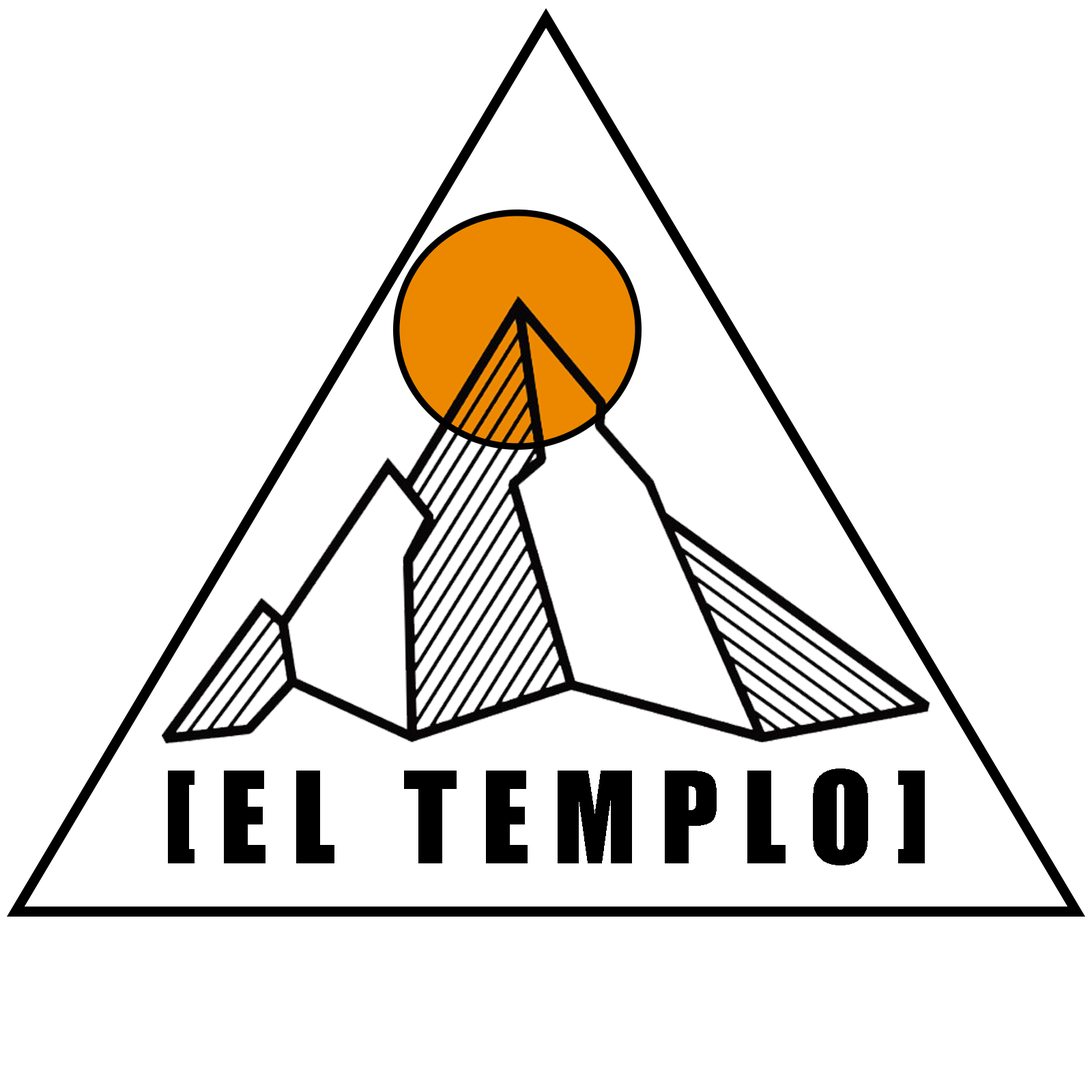
<style>
.page{position:relative;width:1092px;height:1092px;background:#ffffff}
.page>*{position:absolute;margin:0}
.t1{font:117.1px "Impact";letter-spacing:0.2em;color:#000000}
</style>
<div class="page">
<p class="t1" style="left:168px;top:768px;width:757px;height:97px">[EL TEMPLO]</p>
</div>
